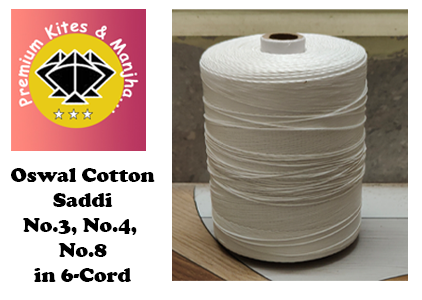
<style>
.page{position:relative;width:422px;height:300px;background:#ffffff}
.page>*{position:absolute;margin:0}
.t1{font:20.8px "CooperBlack";color:#000000}
</style>
<div class="page">
<p class="t1" style="left:11px;top:168px;width:144px;height:114px;text-align:center">Oswal Cotton<br>Saddi<br>No.3, No.4, <br>No.8<br>in 6-Cord</p>
</div>
